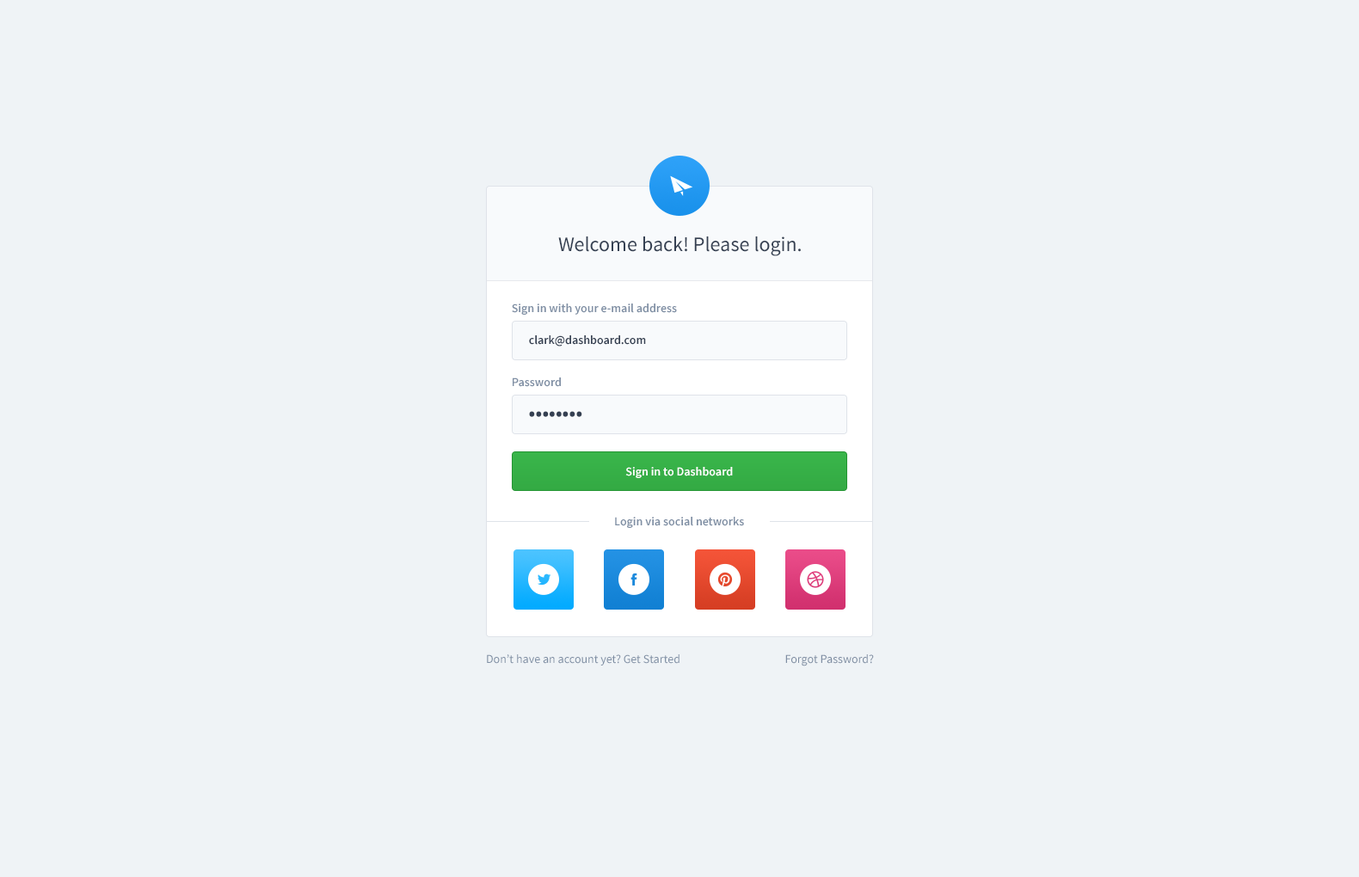
<style>
.page{position:relative;width:1359px;height:877px;background:#eff3f6}
.page>*{position:absolute;margin:0}
.t1{font:20.6px "SourceSansPro-Regular";color:#354052}
.t2{font:12px "SourceSansPro-Semibold";color:#7f8fa4}
.t3{font:12px "SourceSansPro-Semibold";color:#354052}
.t4{font:20.6px "SourceSansPro-Semibold";color:#354052}
.t5{font:12px "SourceSansPro-Semibold";color:#ffffff}
.t6{font:12px "SourceSansPro-Regular";color:#7f8fa4}
.t7{font:12px "SourceSansPro-Regular";color:#7f8ea3}
</style>
<div class="page">
<p class="t1" style="left:558px;top:237px;width:243px;height:19px">Welcome back! Please login.</p>
<p class="t2" style="left:512px;top:304px;width:165px;height:11px">Sign in with your e-mail address</p>
<p class="t3" style="left:529px;top:335px;width:117px;height:12px">clark@dashboard.com</p>
<p class="t2" style="left:513px;top:378px;width:48px;height:9px">Password</p>
<p class="t4" style="left:529px;top:411px;width:53px;height:6px">••••••••</p>
<p class="t5" style="left:625px;top:467px;width:108px;height:11px">Sign in to Dashboard</p>
<p class="t2" style="left:615px;top:517px;width:129px;height:11px">Login via social networks</p>
<p class="t6" style="left:487px;top:655px;width:193px;height:11px">Don’t have an account yet? Get Started</p>
<p class="t7" style="left:785px;top:655px;width:89px;height:12px">Forgot Password?</p>
</div>
